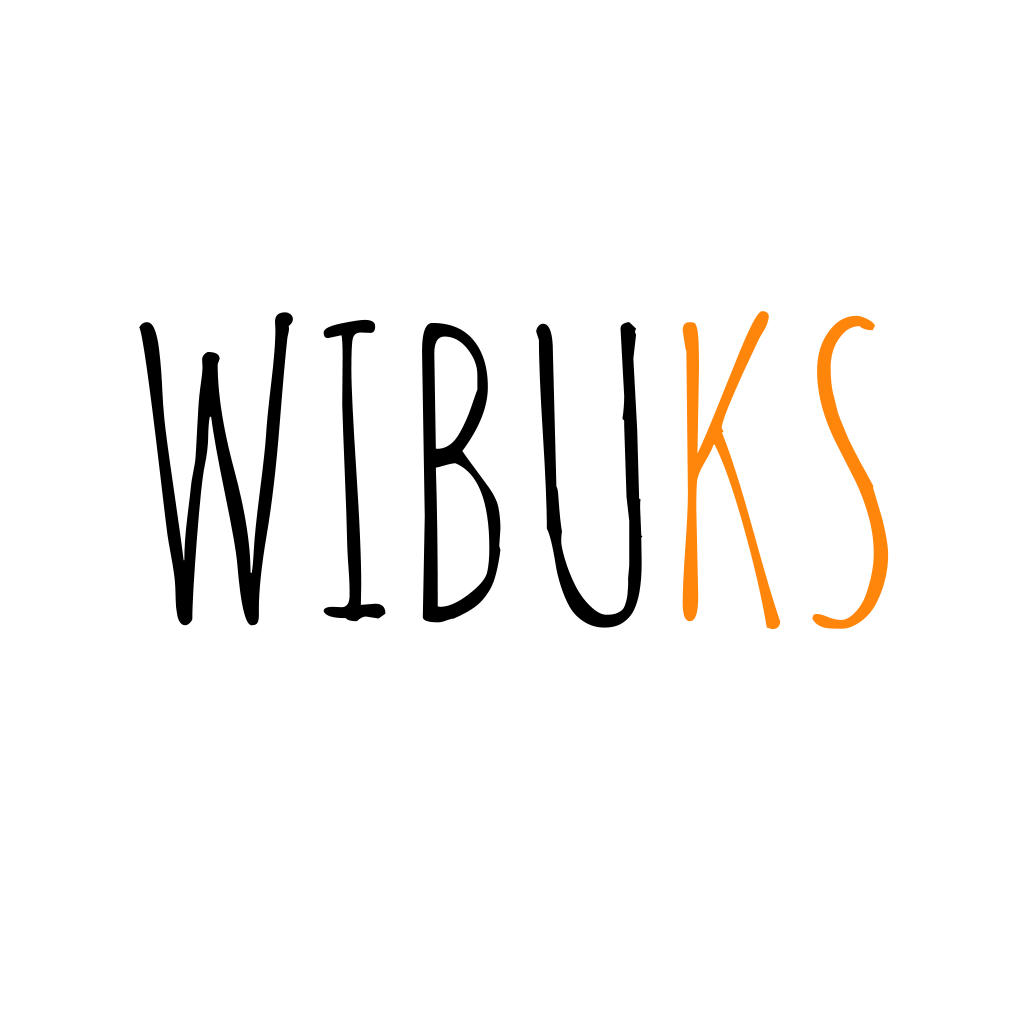
<style>
.page{position:relative;width:1024px;height:1024px;background:#ffffff}
.page>*{position:absolute;margin:0}
.t1{font:395.8px "AmaticSC-Regular";color:#000000}
.t2{font:395.8px "AmaticSC-Regular";color:#ff850b}
</style>
<div class="page">
<p class="t1" style="left:139px;top:311px;width:750px;height:319px">WIBU<span class="t2">KS</span></p>
</div>
